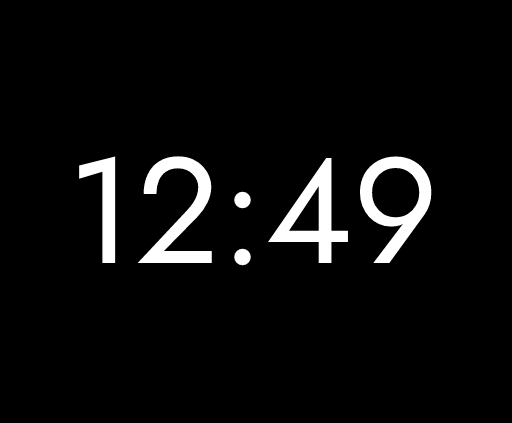
<style>
.page{position:relative;width:512px;height:423px;background:#000000}
.page>*{position:absolute;margin:0}
.t1{font:150px "Jost-Regular";color:#ffffff}
</style>
<div class="page">
<p class="t1" style="left:79px;top:156px;width:353px;height:110px">12:49</p>
</div>
